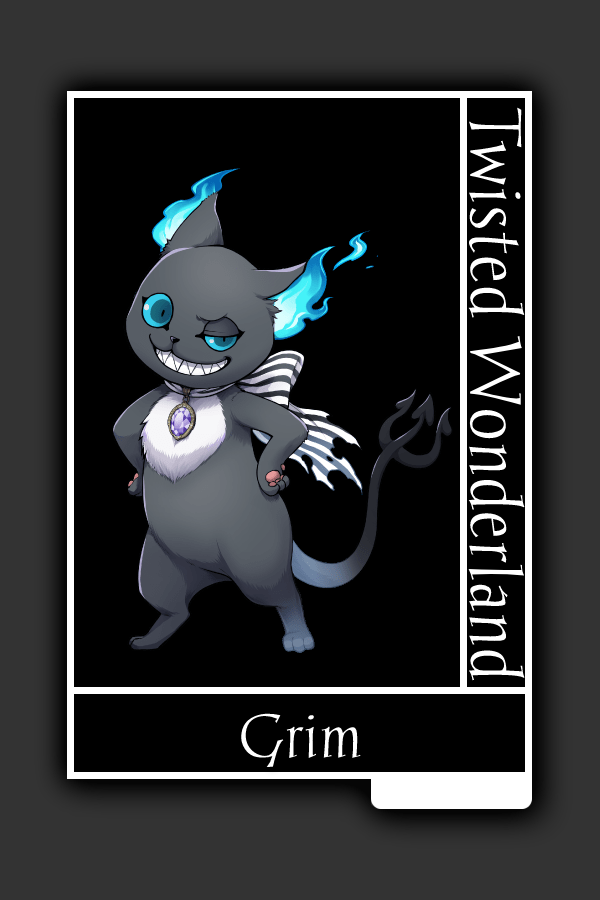
<style>
.page{position:relative;width:600px;height:900px;background:#000000}
.page>*{position:absolute;margin:0}
.t1{font:60px "Chantelli-Antiqua";color:#ffffff}
.t2{font:50px "Chantelli-Antiqua";color:#ffffff}
</style>
<div class="page">
<p class="t1" style="left:468px;top:107px;width:57px;height:574px;rotate:90deg">Twisted Wonderland</p>
<p class="t2" style="left:240px;top:712px;width:121px;height:56px">Grim</p>
</div>
